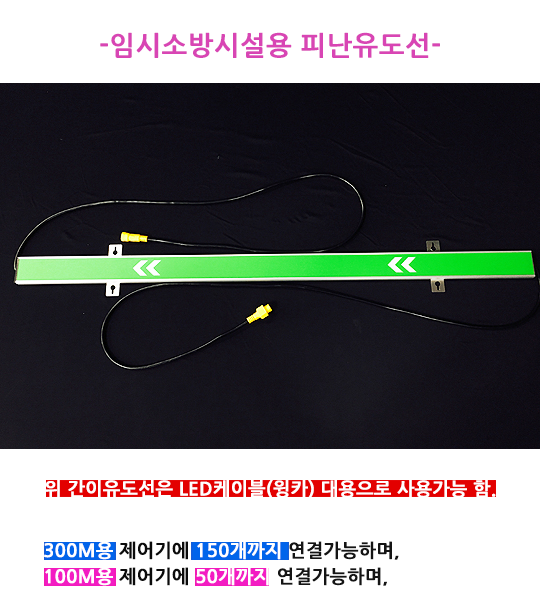
<style>
.page{position:relative;width:540px;height:607px;background:#ffffff}
.page>*{position:absolute;margin:0}
.t1{font:27px "NanumGothicBold";color:#d845b4;font-weight:bold}
.t2{font:18.3px "NanumGothicBold";color:#ffffff;font-weight:bold}
.t3{font:18.3px "NanumGothicBold";color:#141414;font-weight:bold}
.t4{font:18.3px "NanumGothicBold";color:#0b0b0b;font-weight:bold}
</style>
<div class="page">
<p class="t1" style="left:100px;top:32px;width:340px;height:26px">-임시소방시설용 피난유도선-</p>
<p class="t2" style="left:44px;top:480px;width:452px;height:19px">위 간이유도선은 LED케이블(윙카) 대용으로 사용가능 함.</p>
<p class="t3" style="left:44px;top:541px;width:355px;height:19px"><span class="t2">300M용 </span><span class="t4">제어기에</span><span class="t2"> 150개까지 </span>연결가능하며,</p>
<p class="t3" style="left:45px;top:567px;width:342px;height:19px"><span class="t2">100M용 </span><span class="t4">제어기에</span><span class="t2"> 50개까지 </span>연결가능하며,</p>
</div>
